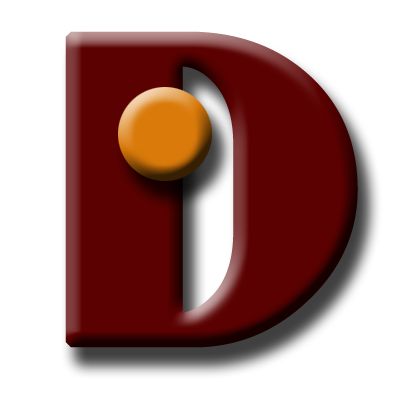
<style>
.page{position:relative;width:400px;height:400px;background:#ffffff}
.page>*{position:absolute;margin:0}
.t1{font:400px "BinnerPosterMT";letter-spacing:0.05em;font-weight:bold}
</style>
<div class="page">
<p class="t1" style="left:65px;top:31px;width:293px;height:317px">D</p>
</div>
